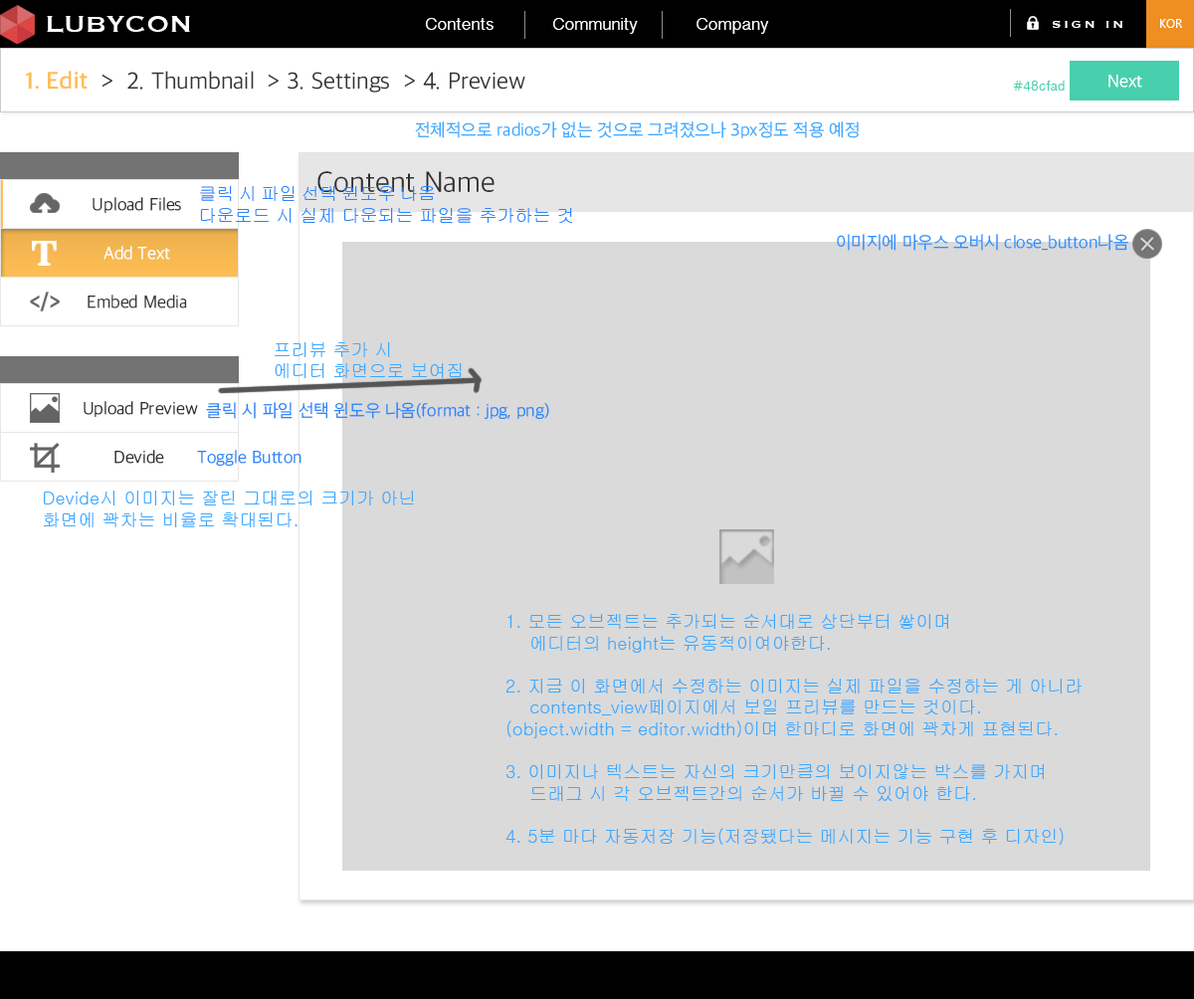
<style>
.page{position:relative;width:1194px;height:999px;background:#dadada}
.page>*{position:absolute;margin:0}
.t1{font:29.8px "Copperplate";color:#ffffff}
.t2{font:17.9px "TamilSangamMN";color:#ffffff}
.t3{font:13.9px "Copperplate";letter-spacing:0.2em;color:#ffffff}
.t4{font:11.9px "LaoUI";color:#ffffff}
.t5{font:23.9px "AppleSDGothicNeo-Light";color:#353535}
.t6{font:23.9px "AppleSDGothicNeo-Bold";color:#ffbe54}
.t7{font:17.9px "AppleSDGothicNeo-Light";color:#ffffff}
.t8{font:13.9px "TamilSangamMN";color:#48cfad}
.t9{font:17.9px "AppleSDGothicNeo-Light";color:#3caaff}
.t10{font:29.8px "AppleSDGothicNeo-Light";color:#2e2e2e}
.t11{font:17.9px "AppleSDGothicNeo-Light";color:#2f2f2f}
.t12{font:17.9px "Gulim";color:#2987fb}
.t13{font:17.9px "AppleSDGothicNeo-Light";color:#2a93ff}
.t14{font:17.9px "AppleSDGothicNeo-Light";color:#353535}
.t15{font:17.9px "Gulim";color:#3caaff}
.t16{font:17.9px "AppleSDGothicNeo-Light";color:#2987fb}
.t17{font:17.9px "AppleSDGothicNeo-Light";color:#2e2e2e}
</style>
<div class="page">
<p class="t1" style="left:47px;top:16px;width:143px;height:17px">LUBYCON</p>
<p class="t2" style="left:426px;top:18px;width:67px;height:12px">Contents</p>
<p class="t2" style="left:553px;top:18px;width:85px;height:16px">Community</p>
<p class="t2" style="left:696px;top:18px;width:73px;height:16px">Company</p>
<p class="t3" style="left:1053px;top:21px;width:69px;height:7px">SIGN IN</p>
<p class="t4" style="left:1160px;top:19px;width:23px;height:9px">KOR</p>
<p class="t5" style="left:26px;top:71px;width:499px;height:22px"><span class="t6">1. Edit</span>  &gt;  2. Thumbnail  &gt; 3. Settings  &gt; 4. Preview</p>
<p class="t7" style="left:1108px;top:75px;width:34px;height:13px">Next</p>
<p class="t8" style="left:1013px;top:81px;width:51px;height:10px">#48cfad</p>
<p class="t9" style="left:415px;top:121px;width:444px;height:17px">전체적으로 radios가 없는 것으로 그려졌으나 3px정도 적용 예정</p>
<p class="t10" style="left:317px;top:171px;width:177px;height:21px">Content Name</p>
<p class="t11" style="left:93px;top:197px;width:88px;height:16px">Upload Files</p>
<p class="t12" style="left:200px;top:186px;width:372px;height:37px">클릭 시 파일 선택 윈도우 나옴<br>다운로드 시 실제 다운되는 파일을 추가하는 것</p>
<p class="t13" style="left:837px;top:234px;width:291px;height:17px">이미지에 마우스 오버시 close_button나옴</p>
<p class="t7" style="left:103px;top:246px;width:67px;height:14px">Add Text</p>
<p class="t14" style="left:88px;top:294px;width:99px;height:14px">Embed Media</p>
<p class="t15" style="left:275px;top:342px;width:187px;height:36px">프리뷰 추가 시<br>에디터 화면으로 보여짐</p>
<p class="t11" style="left:84px;top:401px;width:114px;height:16px">Upload Preview</p>
<p class="t16" style="left:206px;top:402px;width:343px;height:18px">클릭 시 파일 선택 윈도우 나옴(format : jpg, png)</p>
<p class="t17" style="left:114px;top:450px;width:50px;height:14px">Devide</p>
<p class="t16" style="left:197px;top:450px;width:104px;height:17px">Toggle Button</p>
<p class="t15" style="left:43px;top:490px;width:371px;height:37px">Devide시 이미지는 잘린 그대로의 크기가 아닌<br>화면에 꽉차는 비율로 확대된다.</p>
<p class="t15" style="left:505px;top:614px;width:576px;height:231px">1. 모든 오브젝트는 추가되는 순서대로 상단부터 쌓이며<br>    에디터의 height는 유동적이여야한다.<br><br>2. 지금 이 화면에서 수정하는 이미지는 실제 파일을 수정하는 게 아니라<br>    contents_view페이지에서 보일 프리뷰를 만드는 것이다.<br>(object.width = editor.width)이며 한마디로 화면에 꽉차게 표현된다.<br><br>3. 이미지나 텍스트는 자신의 크기만큼의 보이지않는 박스를 가지며<br>    드래그 시 각 오브젝트간의 순서가 바뀔 수 있어야 한다.<br><br>4. 5분 마다 자동저장 기능(저장됐다는 메시지는 기능 구현 후 디자인)</p>
</div>
